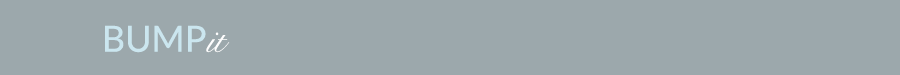
<style>
.page{position:relative;width:900px;height:75px;background:#9ca8ac}
.page>*{position:absolute;margin:0}
.t1{font:36px "Lato-Regular";color:#cbe6ef}
.t2{font:36px "SnellRoundhand";color:#fefefe}
</style>
<div class="page">
<p class="t1" style="left:105px;top:25px;width:125px;height:28px">BUMP<span class="t2">it</span></p>
</div>
